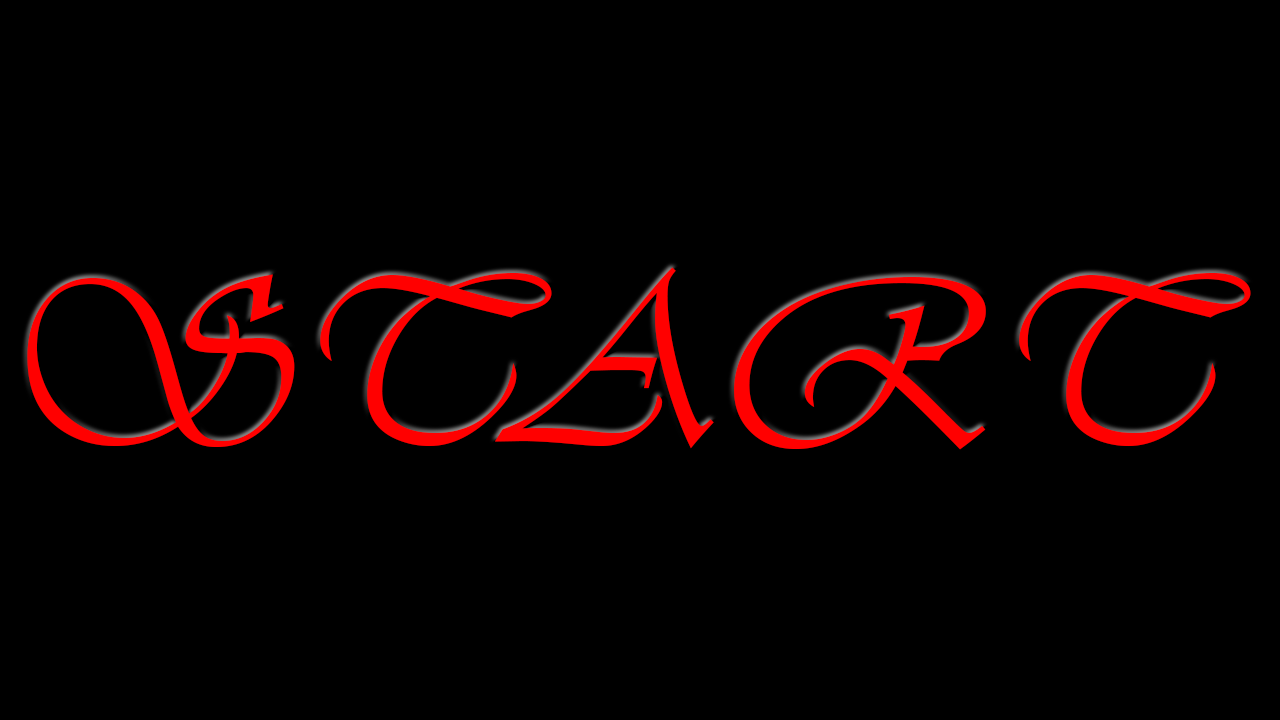
<style>
.page{position:relative;width:1280px;height:720px;background:#000000}
.page>*{position:absolute;margin:0}
.t1{font:147.4px "Vivaldii";color:#ff0000}
</style>
<div class="page">
<p class="t1" style="left:27px;top:267px;width:1224px;height:183px">START</p>
</div>
